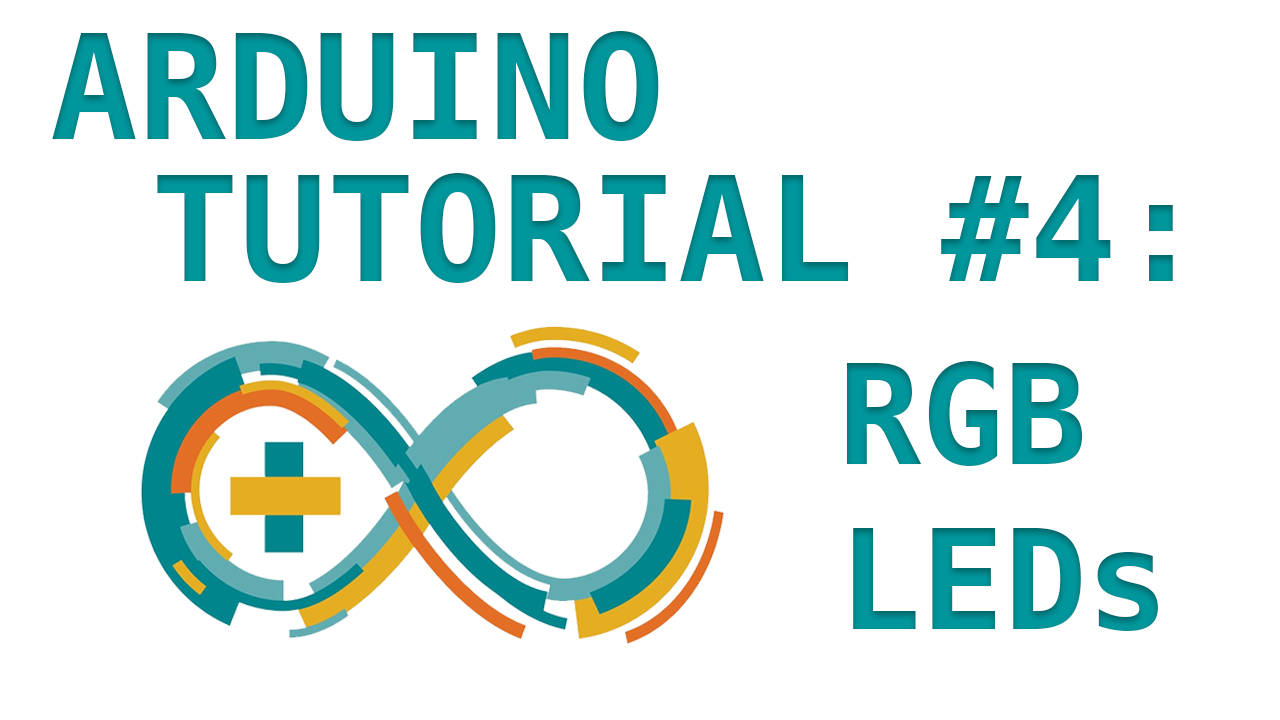
<style>
.page{position:relative;width:1280px;height:720px;background:#ffffff}
.page>*{position:absolute;margin:0}
.t1{font:145.8px "Menlo-Bold";color:#00979c}
.t2{font:137.5px "Menlo-Bold";color:#00979c}
</style>
<div class="page">
<p class="t1" style="left:52px;top:31px;width:607px;height:110px">ARDUINO</p>
<p class="t1" style="left:157px;top:173px;width:1016px;height:110px">TUTORIAL #4:</p>
<p class="t2" style="left:846px;top:361px;width:312px;height:270px">RGB <br>LEDs</p>
</div>
